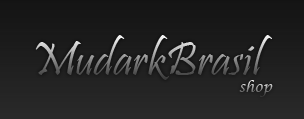
<style>
.page{position:relative;width:304px;height:119px}
.page>*{position:absolute;margin:0}
.t1{font:48px "Pristina-Regular"}
.t2{font:14px "LucidaCalligraphy-Italic"}
</style>
<div class="page">
<p class="t1" style="left:35px;top:35px;width:237px;height:45px">MudarkBrasil</p>
<p class="t2" style="left:239px;top:80px;width:34px;height:17px">shop</p>
</div>
